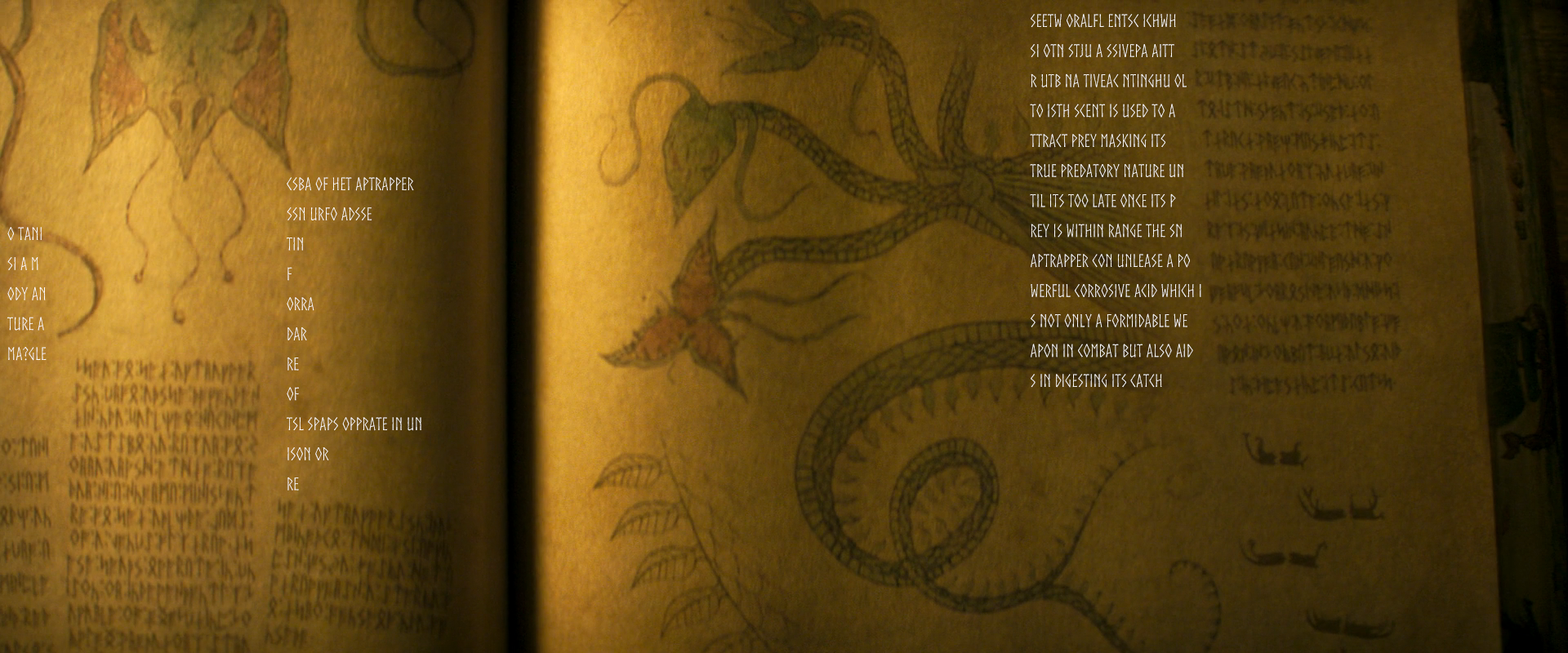
<style>
.page{position:relative;width:1568px;height:653px}
.page>*{position:absolute;margin:0}
.t1{font:17.1px "Norse";color:#ffffff}
</style>
<div class="page">
<p class="t1" style="left:1030px;top:14px;width:171px;height:374px">seetw oralfl entsc ichwh<br>si otn stju a ssivepa aitt<br>r utb na tiveac ntinghu ol<br>to isth scent is used to a<br>ttract prey masking its<br>true predatory nature un<br>til its too late once its p<br>rey is within range the sn<br>aptrapper con unlease a po<br>werful corrosive acid which i<br>s not only a formidable we<br>apon in combat but also aid<br>s in digesting its catch</p>
<p class="t1" style="left:287px;top:177px;width:134px;height:314px">csba of het aptrapper<br>ssn urfo adsse<br>tin<br>f<br>orra<br>dar<br>re<br>of<br>tsl spaps opprate in un<br>ison or <br>re</p>
<p class="t1" style="left:7px;top:227px;width:40px;height:134px">o tani<br>si a m<br>ody an<br>ture a<br>ma?gle</p>
</div>
